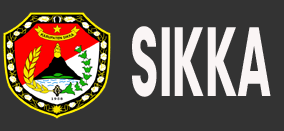
<style>
.page{position:relative;width:284px;height:131px;background:#333333}
.page>*{position:absolute;margin:0}
.t1{font:98px "Poppins-Bold";color:#faf5f5;scale:0.47 1}
</style>
<div class="page">
<p class="t1" style="left:132px;top:26px;width:139px;height:71px">SIKKA</p>
</div>
